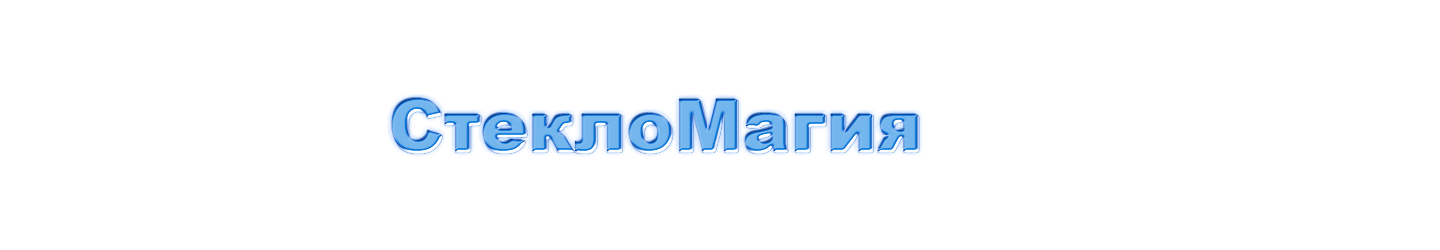
<style>
.page{position:relative;width:1440px;height:250px;background:#ffffff}
.page>*{position:absolute;margin:0}
.t1{font:72px "Arial-Black"}
</style>
<div class="page">
<p class="t1" style="left:391px;top:98px;width:527px;height:54px">СтеклоМагия</p>
</div>
